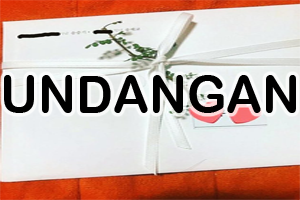
<style>
.page{position:relative;width:300px;height:200px}
.page>*{position:absolute;margin:0}
.t1{font:52px "ArialRoundedMTBold";color:#000000;scale:0.96 1}
</style>
<div class="page">
<p class="t1" style="left:4px;top:75px;width:292px;height:38px">UNDANGAN</p>
</div>
